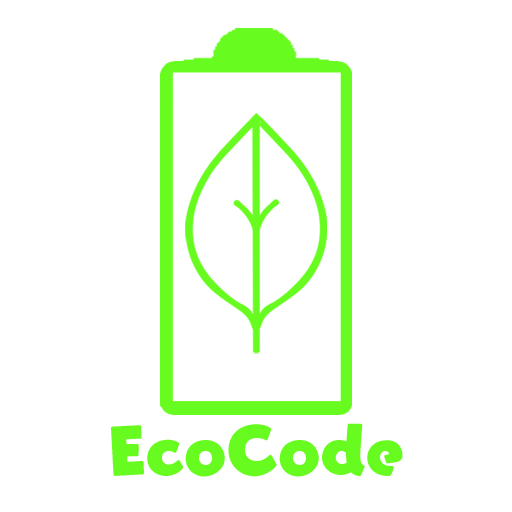
<style>
.page{position:relative;width:512px;height:512px;background:#ffffff}
.page>*{position:absolute;margin:0}
.t1{font:60px "YurukaStd-UB";color:#67fb1f}
</style>
<div class="page">
<p class="t1" style="left:111px;top:423px;width:292px;height:54px">EcoCode</p>
</div>
